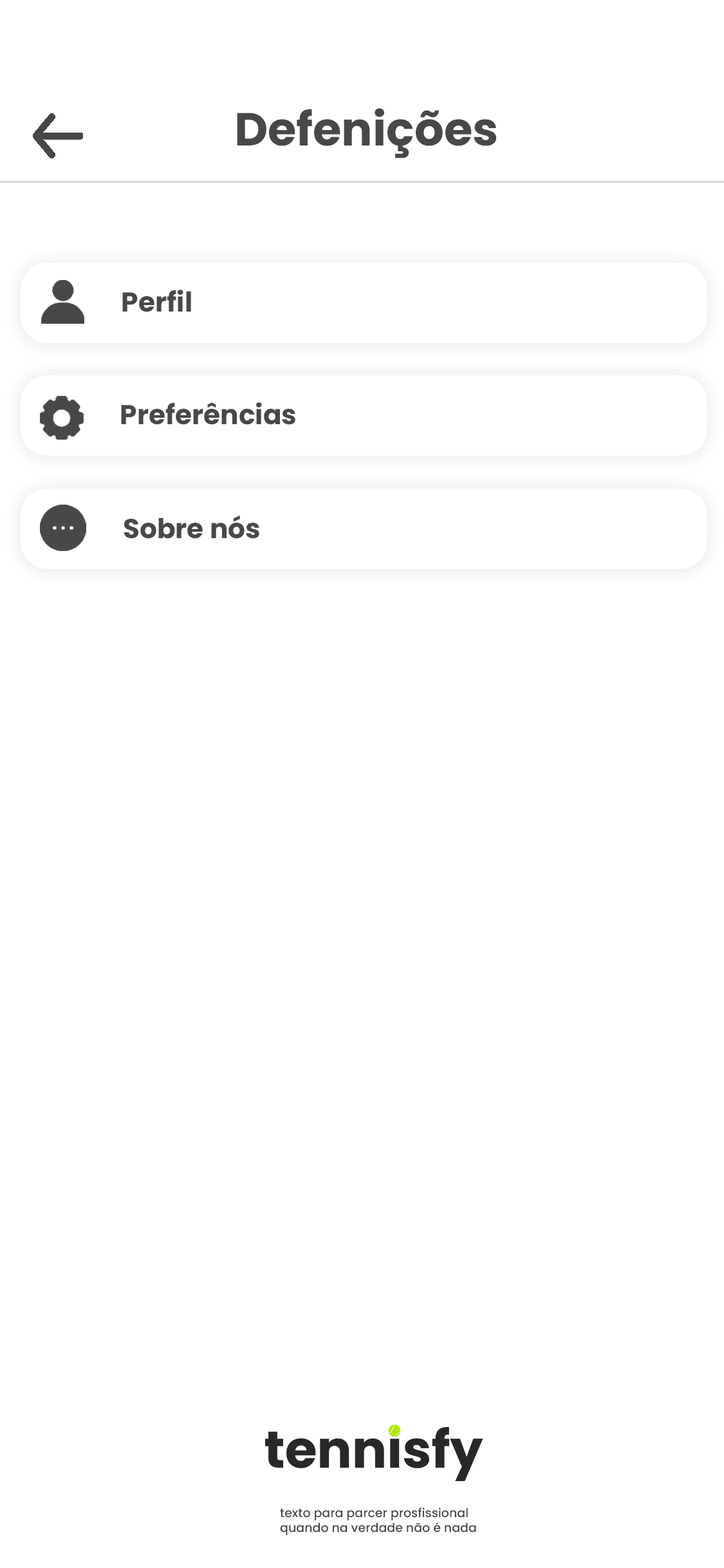
<style>
.page{position:relative;width:724px;height:1568px;background:#ffffff}
.page>*{position:absolute;margin:0}
.t1{font:46.3px "Poppins-Bold";color:#484848}
.t2{font:27.2px "Poppins-Bold";color:#484848}
.t3{font:12.2px/14.8px "Poppins-Medium";color:#484848}
</style>
<div class="page">
<p class="t1" style="left:237px;top:108px;width:259px;height:50px">Defenições</p>
<p class="t2" style="left:122px;top:290px;width:69px;height:22px">Perfil</p>
<p class="t2" style="left:121px;top:402px;width:174px;height:23px">Preferências</p>
<p class="t2" style="left:124px;top:515px;width:135px;height:24px">Sobre nós</p>
<p class="t3" style="left:280px;top:1507px;width:196px;height:28px">texto para parcer prosfissional<br>quando na verdade não é nada</p>
</div>
